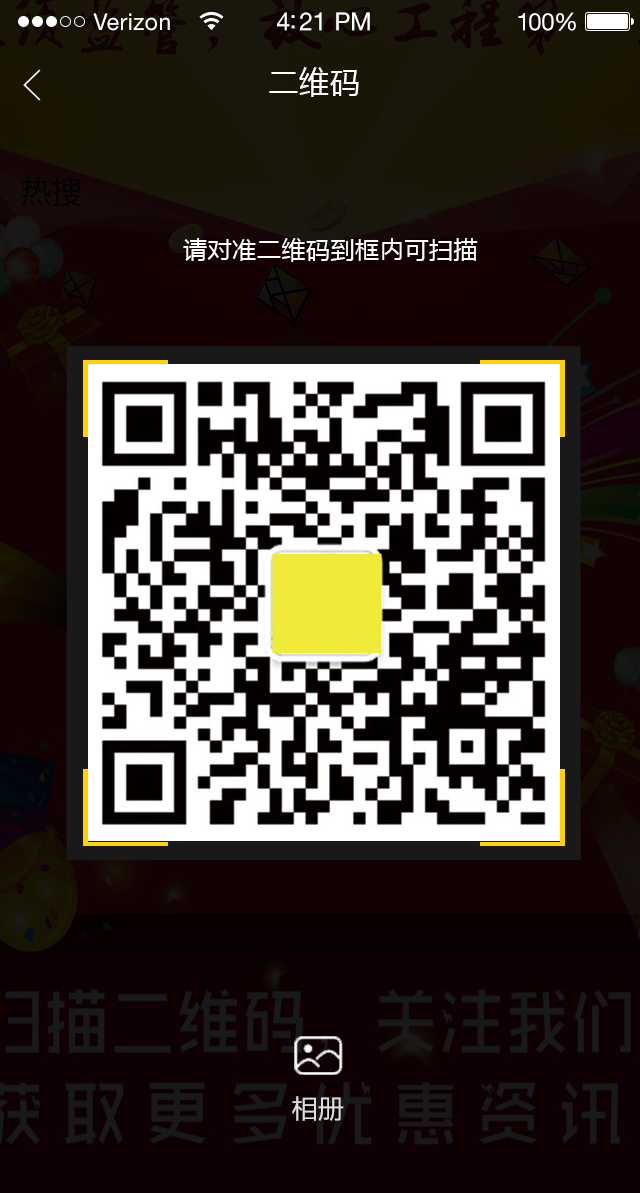
<style>
.page{position:relative;width:640px;height:1193px}
.page>*{position:absolute;margin:0}
.t1{font:23px "HelveticaNeueLTStd-Roman";letter-spacing:0.02em;color:#ffffff}
.t2{font:25px "HelveticaNeueLTStd-Roman";letter-spacing:-0.02em;color:#ffffff}
.t3{font:24px "HelveticaNeueLTStd-Roman";letter-spacing:-0.02em;color:#ffffff}
.t4{font:30px "MicrosoftYaHei";letter-spacing:0.025em;color:#ffffff}
.t5{font:30px "MicrosoftYaHei";letter-spacing:0.025em;color:#030303}
.t6{font:24px "MicrosoftYaHei";letter-spacing:0.025em;color:#ffffff}
.t7{font:25.8px "MicrosoftYaHei";letter-spacing:0.025em;color:#e0dede}
</style>
<div class="page">
<p class="t1" style="left:93px;top:13px;width:77px;height:18px">Verizon</p>
<p class="t2" style="left:277px;top:12px;width:93px;height:19px">4:21 PM</p>
<p class="t3" style="left:518px;top:12px;width:58px;height:19px">100%</p>
<p class="t4" style="left:269px;top:67px;width:90px;height:30px">二维码</p>
<p class="t5" style="left:21px;top:177px;width:61px;height:29px">热搜</p>
<p class="t6" style="left:183px;top:238px;width:295px;height:24px">请对准二维码到框内可扫描</p>
<p class="t7" style="left:292px;top:1096px;width:52px;height:25px">相册</p>
</div>
